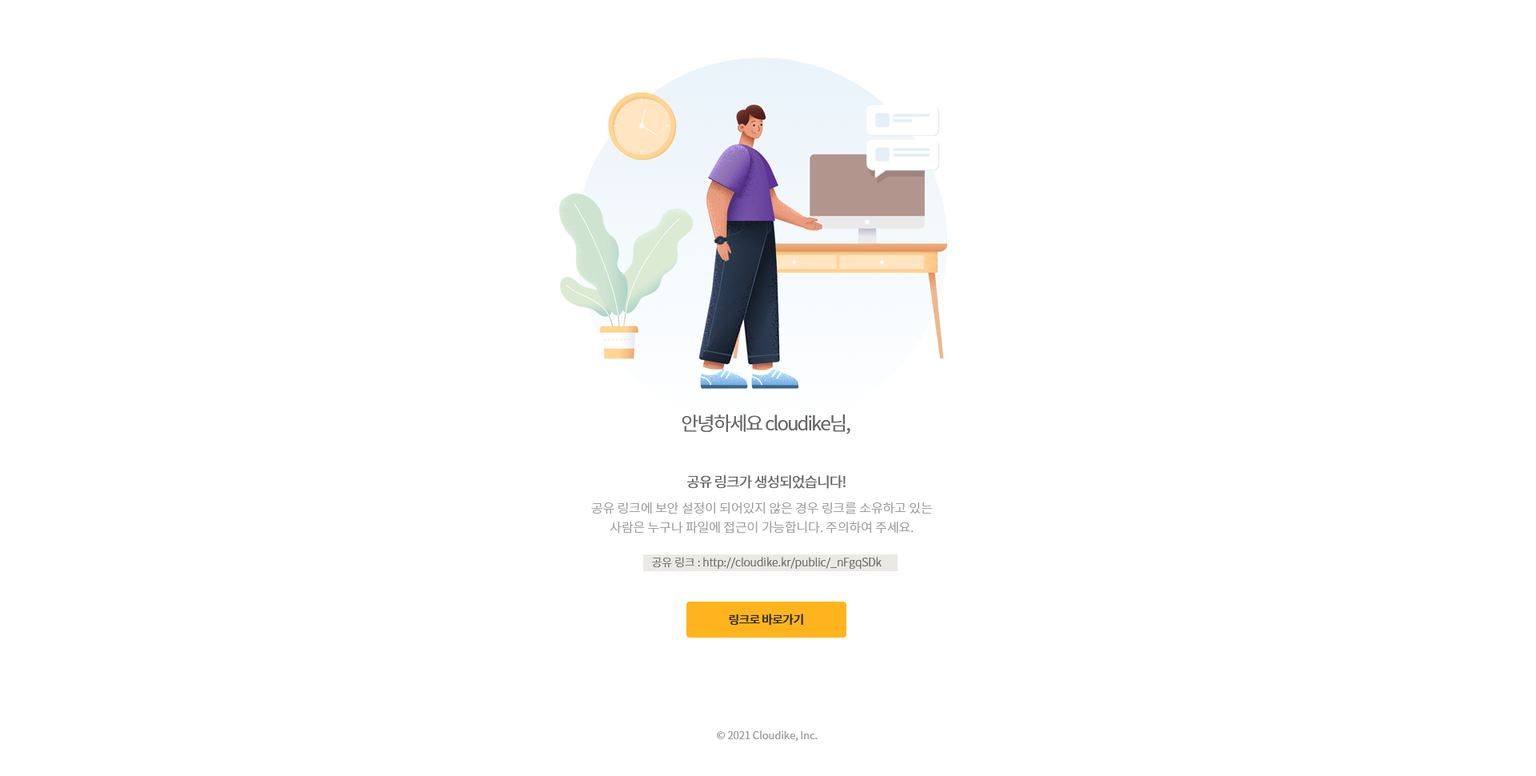
<style>
.page{position:relative;width:1536px;height:776px;background:#ffffff}
.page>*{position:absolute;margin:0}
.t1{font:19.2px "NotoSansCJKkr-DemiLight";letter-spacing:-0.075em;color:#666666}
.t2{font:14.4px "NotoSansCJKkr-Regular";letter-spacing:-0.05em;color:#666666}
.t3{font:12.8px/19.2px "NotoSansCJKkr-Light";letter-spacing:-0.005em;color:#999999}
.t4{font:11.2px "NotoSansCJKkr-Light";letter-spacing:-0.005em;color:#666666}
.t5{font:12px "NotoSansCJKkr-Medium";letter-spacing:-0.05em;color:#2d2d2d}
.t6{font:10.4px "NotoSansCJKkr-DemiLight";color:#999999}
</style>
<div class="page">
<p class="t1" style="left:682px;top:414px;width:169px;height:20px">안녕하세요 cloudike님,</p>
<p class="t2" style="left:687px;top:475px;width:159px;height:14px">공유 링크가 생성되었습니다!</p>
<p class="t3" style="left:591px;top:502px;width:342px;height:32px;text-align:center">공유 링크에 보안 설정이 되어있지 않은 경우 링크를 소유하고 있는<br>사람은 누구나 파일에 접근이 가능합니다. 주의하여 주세요.</p>
<p class="t4" style="left:652px;top:557px;width:230px;height:12px">공유 링크 : http://cloudike.kr/public/_nFgqSDk</p>
<p class="t5" style="left:729px;top:614px;width:74px;height:12px">링크로 바로가기</p>
<p class="t6" style="left:717px;top:731px;width:101px;height:11px">© 2021 Cloudike, Inc.</p>
</div>
